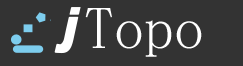
<style>
.page{position:relative;width:243px;height:66px;background:#333333}
.page>*{position:absolute;margin:0}
.t1{font:60px "SimSun";color:#ffffff}
</style>
<div class="page">
<p class="t1" style="left:85px;top:8px;width:117px;height:49px">Topo</p>
</div>
